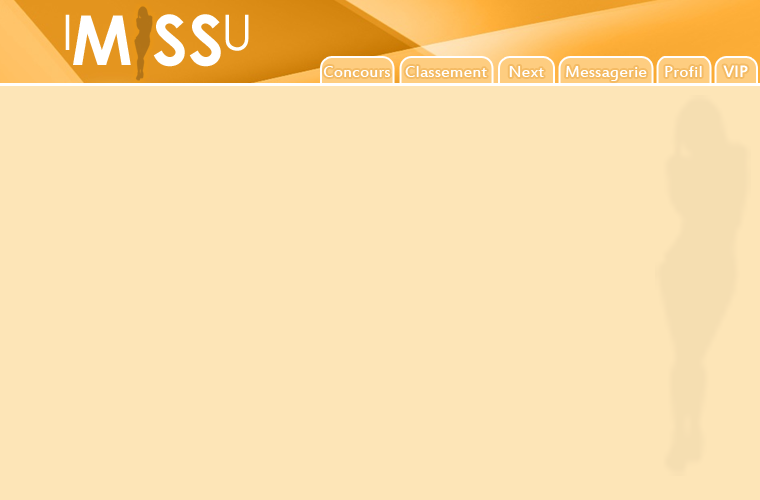
<style>
.page{position:relative;width:760px;height:500px;background:#fde5b7}
.page>*{position:absolute;margin:0}
.t1{font:77.6px "SEXYSPANISHWOMANSILUETAS";color:#b17317}
.t2{font:49.1px "LevenimMT";color:#ffffff}
.t3{font:69.1px "CenturyGothic-Bold";color:#ffffff}
.t4{font:18px "EstrangeloEdessa";color:#ffffff}
.t5{font:393.6px "SEXYSPANISHWOMANSILUETAS";color:#f5deb1}
</style>
<div class="page">
<p class="t1" style="left:134px;top:6px;width:19px;height:75px">A</p>
<p class="t2" style="left:65px;top:14px;width:5px;height:36px">I</p>
<p class="t3" style="left:73px;top:15px;width:58px;height:50px">M</p>
<p class="t3" style="left:153px;top:14px;width:68px;height:53px">SS</p>
<p class="t2" style="left:225px;top:14px;width:24px;height:37px">U</p>
<p class="t4" style="left:723px;top:65px;width:25px;height:12px">VIP</p>
<p class="t4" style="left:323px;top:66px;width:67px;height:11px">Concours</p>
<p class="t4" style="left:405px;top:66px;width:82px;height:11px">Classement</p>
<p class="t4" style="left:509px;top:66px;width:35px;height:11px">Next</p>
<p class="t4" style="left:566px;top:66px;width:81px;height:15px">Messagerie</p>
<p class="t4" style="left:665px;top:66px;width:37px;height:11px">Profil</p>
<p class="t5" style="left:655px;top:95px;width:96px;height:381px">A</p>
</div>
